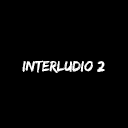
<style>
.page{position:relative;width:128px;height:128px;background:#000000}
.page>*{position:absolute;margin:0}
.t1{font:15.2px "EdoSZ";color:#ffffff}
</style>
<div class="page">
<p class="t1" style="left:22px;top:60px;width:83px;height:13px">interludio 2</p>
</div>
